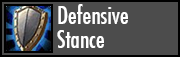
<style>
.page{position:relative;width:180px;height:57px;background:#4c4c4c}
.page>*{position:absolute;margin:0}
.t1{font:24px/24px "FuturaCondensed";color:#ffffff}
</style>
<div class="page">
<p class="t1" style="left:57px;top:4px;width:71px;height:44px;text-align:right">Defensive<br>Stance</p>
</div>
